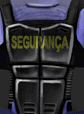
<style>
.page{position:relative;width:84px;height:114px}
.page>*{position:absolute;margin:0}
.t1{font:17.1px "Arial-BoldMT";letter-spacing:-0.04em;color:#525a21;text-transform:uppercase;font-weight:bold;scale:0.52 1}
.t2{font:17.1px "Arial-BoldMT";letter-spacing:-0.04em;color:#525a21;text-transform:uppercase;font-weight:bold;scale:0.53 1}
.t3{font:17.1px "Arial-BoldMT";letter-spacing:-0.04em;color:#525a21;text-transform:uppercase;font-weight:bold;scale:0.57 1}
</style>
<div class="page">
<p class="t1" style="left:11px;top:35px;width:58px;height:17px">SEGURA<span class="t2">N</span><span class="t3">ÇA</span></p>
</div>
